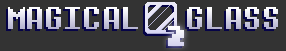
<style>
.page{position:relative;width:286px;height:51px;background:#333333}
.page>*{position:absolute;margin:0}
.t1{font:32px "DeterminationMono"}
.t2{font:32px "MarsNeedsCunnilingus";color:#e6e5f5}
</style>
<div class="page">
<p class="t1" style="left:8px;top:7px;width:130px;height:22px">MAGICAL</p>
<p class="t1" style="left:187px;top:7px;width:91px;height:22px">GLASS</p>
<p class="t2" style="left:168px;top:26px;width:16px;height:20px">2</p>
</div>
